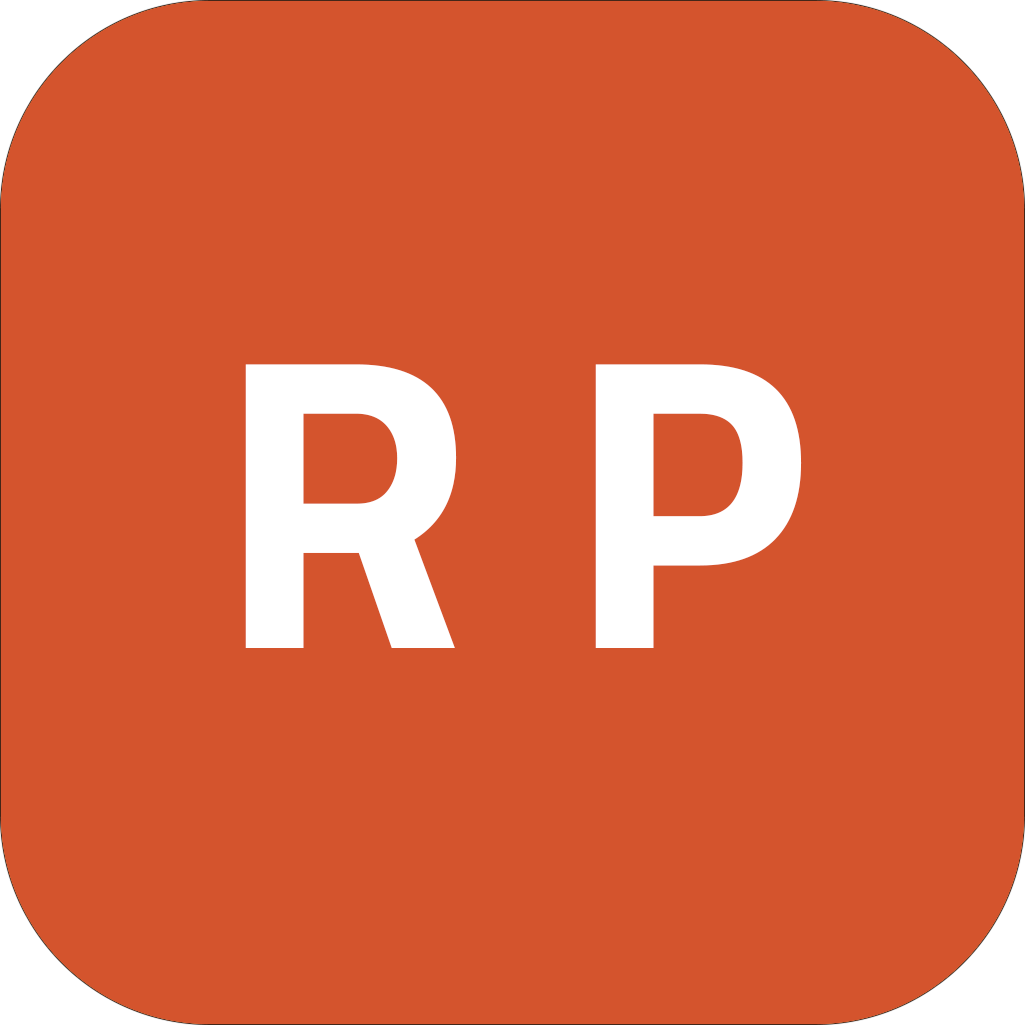
<style>
.page{position:relative;width:1025px;height:1025px;background:#d4542d}
.page>*{position:absolute;margin:0}
.t1{font:416.7px "TitilliumWeb-Bold";color:#ffffff}
</style>
<div class="page">
<p class="t1" style="left:245px;top:364px;width:557px;height:284px">R P</p>
</div>
